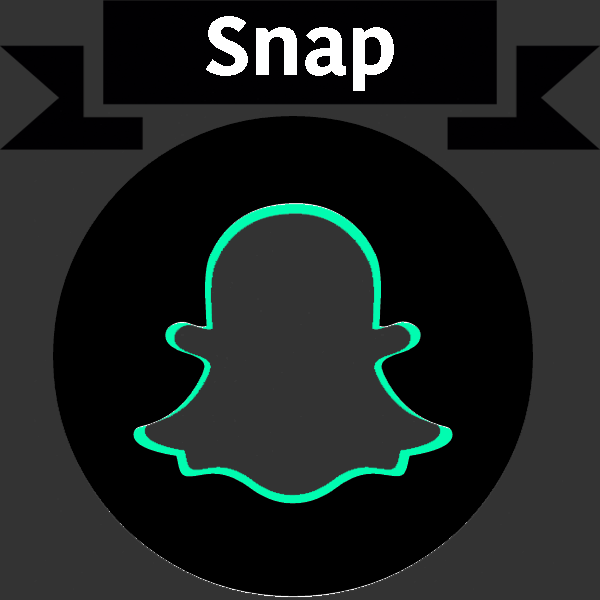
<style>
.page{position:relative;width:600px;height:600px;background:#333333}
.page>*{position:absolute;margin:0}
.t1{font:83.3px "KohinoorDevanagari-Bold";color:#ffffff}
</style>
<div class="page">
<p class="t1" style="left:206px;top:16px;width:188px;height:75px">Snap</p>
</div>
